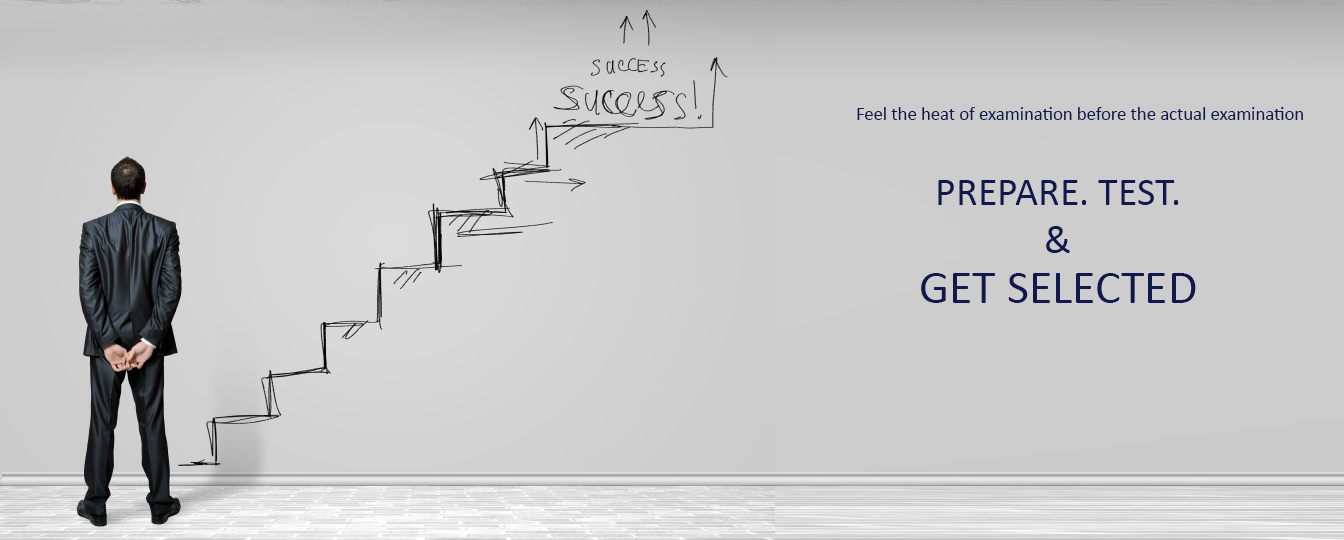
<style>
.page{position:relative;width:1344px;height:540px}
.page>*{position:absolute;margin:0}
.t1{font:18.7px "Calibri";color:#11184e}
.t2{font:40px "Calibri";color:#11184e}
.t3{font:48px "Calibri";color:#11184e}
</style>
<div class="page">
<p class="t1" style="left:857px;top:107px;width:446px;height:13px">Feel the heat of examination before the actual examination</p>
<p class="t2" style="left:938px;top:180px;width:241px;height:73px;text-align:center">PREPARE. TEST.<br>&amp;</p>
<p class="t3" style="left:921px;top:273px;width:275px;height:30px">GET SELECTED</p>
</div>
